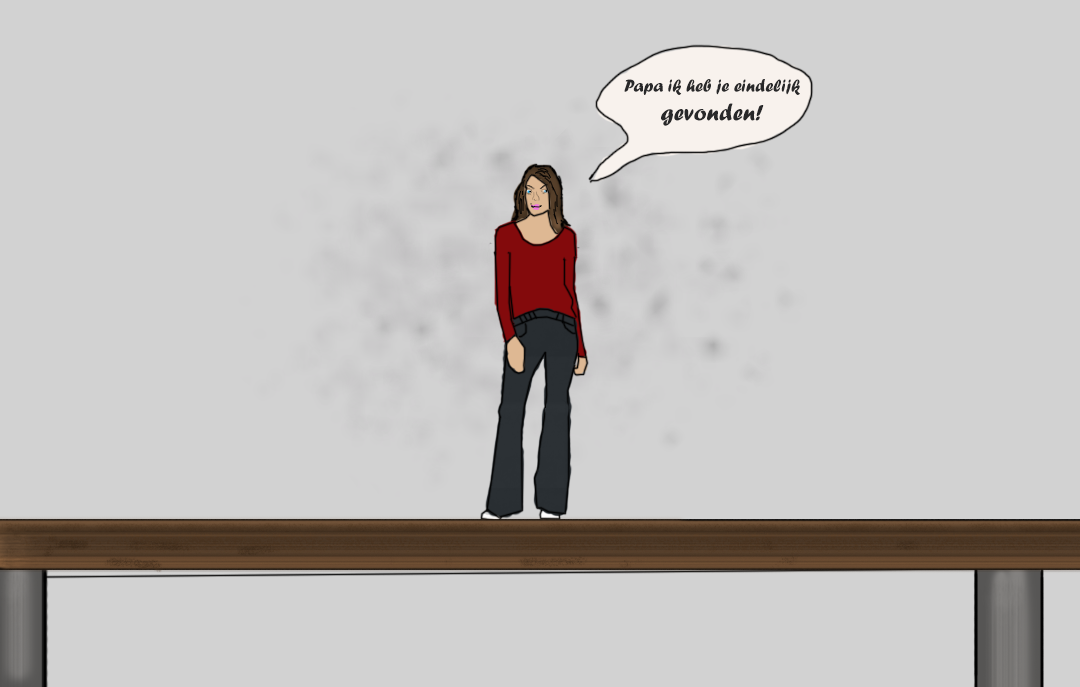
<style>
.page{position:relative;width:1080px;height:687px;background:#d2d2d2}
.page>*{position:absolute;margin:0}
.t1{font:18px "ForteMT";color:#282829}
.t2{font:24px "ForteMT";color:#282829}
</style>
<div class="page">
<p class="t1" style="left:624px;top:79px;width:176px;height:47px;text-align:center">Papa ik heb je eindelijk <span class="t2">gevonden!</span></p>
</div>
